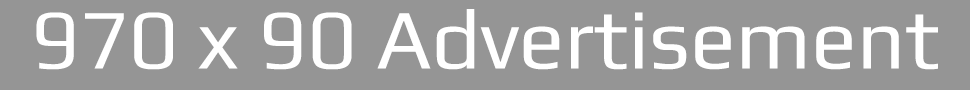
<style>
.page{position:relative;width:970px;height:90px;background:#959595}
.page>*{position:absolute;margin:0}
.t1{font:85px "Play";color:#ffffff}
</style>
<div class="page">
<p class="t1" style="left:36px;top:9px;width:902px;height:61px">970 x 90 Advertisement</p>
</div>
